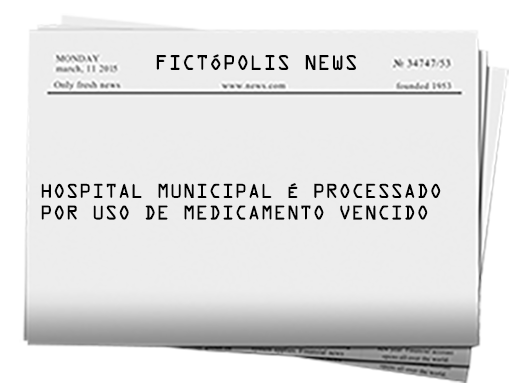
<style>
.page{position:relative;width:512px;height:387px;background:#ededed}
.page>*{position:absolute;margin:0}
.t1{font:18.8px "OCRAStd";color:#000000}
.t2{font:18px "OCRAStd";color:#000000}
</style>
<div class="page">
<p class="t1" style="left:156px;top:54px;width:200px;height:16px">FICTÓPOLIS NEWS</p>
<p class="t2" style="left:41px;top:183px;width:400px;height:37px">HOSPITAL MUNICIPAL É PROCESSADO<br>POR USO DE MEDICAMENTO VENCIDO</p>
</div>
